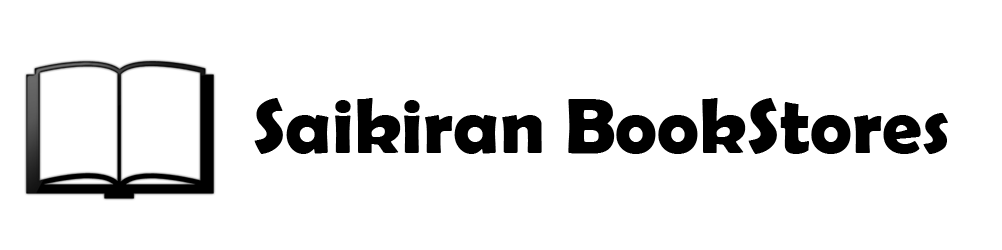
<style>
.page{position:relative;width:1002px;height:250px;background:#ffffff}
.page>*{position:absolute;margin:0}
.t1{font:79.3px "BerlinSansFBDemi-Bold";color:#000000}
</style>
<div class="page">
<p class="t1" style="left:254px;top:98px;width:694px;height:56px">Saikiran BookStores</p>
</div>
